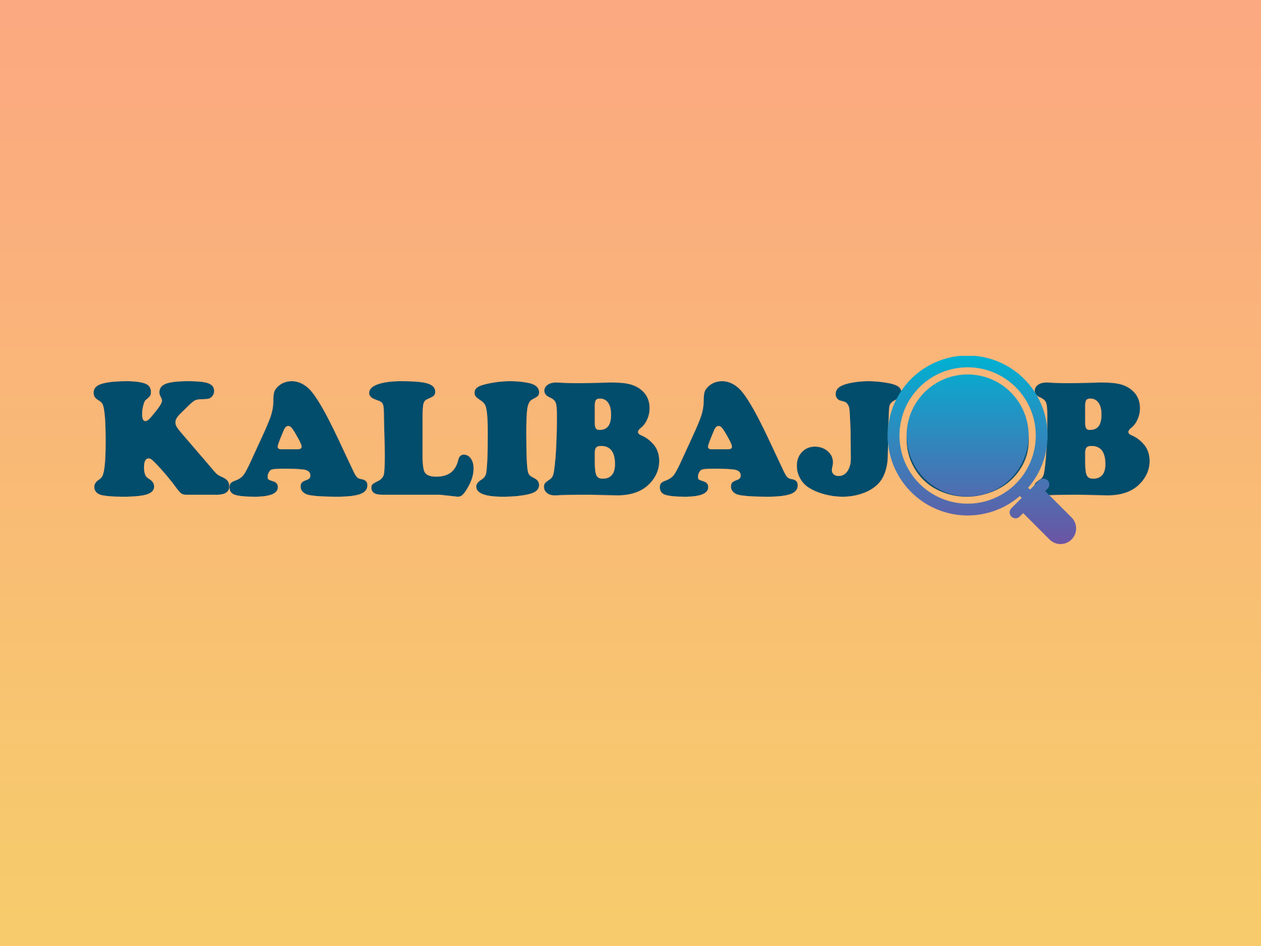
<style>
.page{position:relative;width:1261px;height:946px}
.page>*{position:absolute;margin:0}
.t1{font:166.8px "CooperBlack";color:#014d6b}
</style>
<div class="page">
<p class="t1" style="left:93px;top:381px;width:1057px;height:115px">KALIBAJOB</p>
</div>
